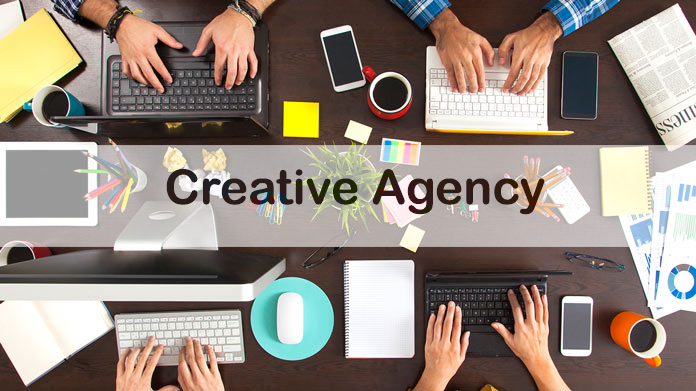
<style>
.page{position:relative;width:696px;height:391px}
.page>*{position:absolute;margin:0}
.t1{font:48px "ArialRoundedMTBold";color:#2b1c17}
</style>
<div class="page">
<p class="t1" style="left:166px;top:169px;width:379px;height:46px">Creative Agency</p>
</div>
